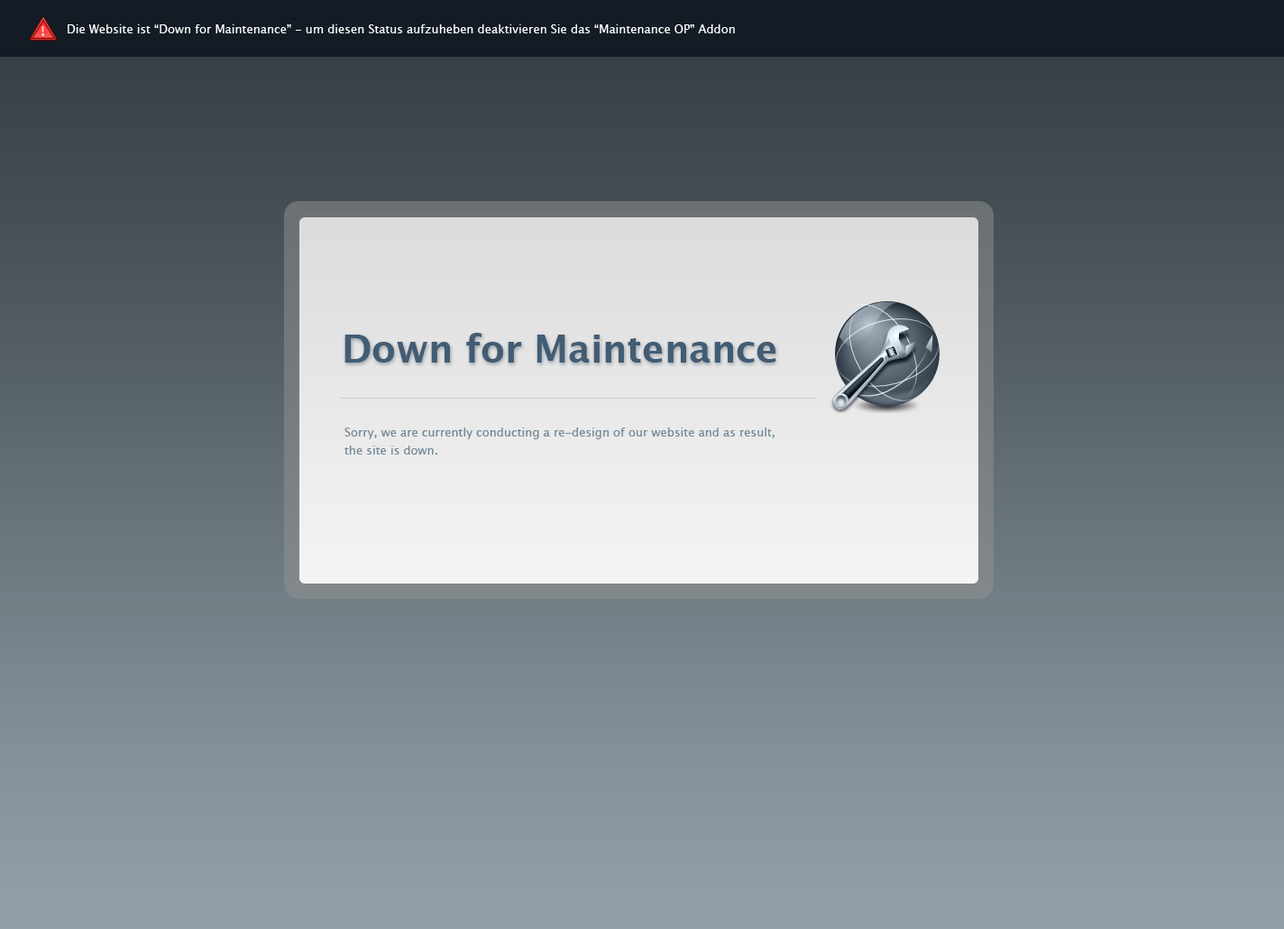
<style>
.page{position:relative;width:1284px;height:929px}
.page>*{position:absolute;margin:0}
.t1{font:11.7px "LucidaGrande";color:#ffffff}
.t2{font:37.6px "LucidaGrande-Bold";color:#425c73}
.t3{font:11.7px/7.2px "LucidaGrande";color:#738997}
</style>
<div class="page">
<p class="t1" style="left:68px;top:24px;width:667px;height:9px">Die Website ist “Down for Maintenance” - um diesen Status aufzuheben deaktivieren Sie das “Maintenance OP” Addon</p>
<p class="t2" style="left:344px;top:333px;width:432px;height:29px">Down for Maintenance</p>
<p class="t3" style="left:344px;top:427px;width:431px;height:27px">Sorry, we are currently conducting a re-design of our website and as result, <br>the site is down.</p>
</div>
